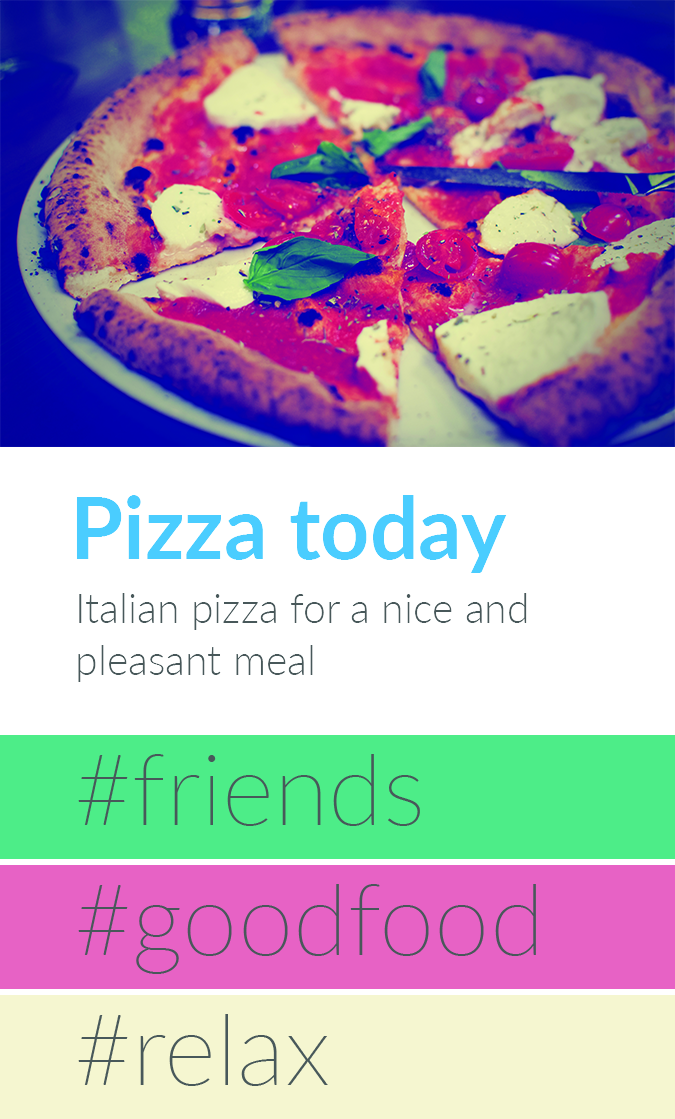
<style>
.page{position:relative;width:675px;height:1119px;background:#ffffff}
.page>*{position:absolute;margin:0}
.t1{font:86px "Lato-Bold";color:#4acdff}
.t2{font:41px/52px "Lato-Light";color:#48585a}
</style>
<div class="page">
<p class="t1" style="left:76px;top:495px;width:431px;height:78px">Pizza today</p>
<p class="t2" style="left:78px;top:593px;width:449px;height:89px;text-align:right">Italian pizza for a nice and pleasant meal</p>
</div>
